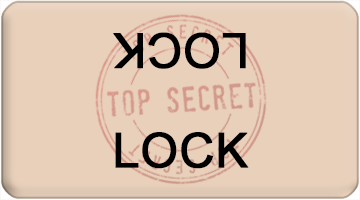
<style>
.page{position:relative;width:360px;height:200px;background:#e8d0bb}
.page>*{position:absolute;margin:0}
.t1{font:48px "ArialMT";color:#000000;font-weight:bold}
</style>
<div class="page">
<p class="t1" style="left:113px;top:32px;width:133px;height:37px;rotate:180deg">LOCK</p>
<p class="t1" style="left:115px;top:132px;width:134px;height:37px">LOCK</p>
</div>
